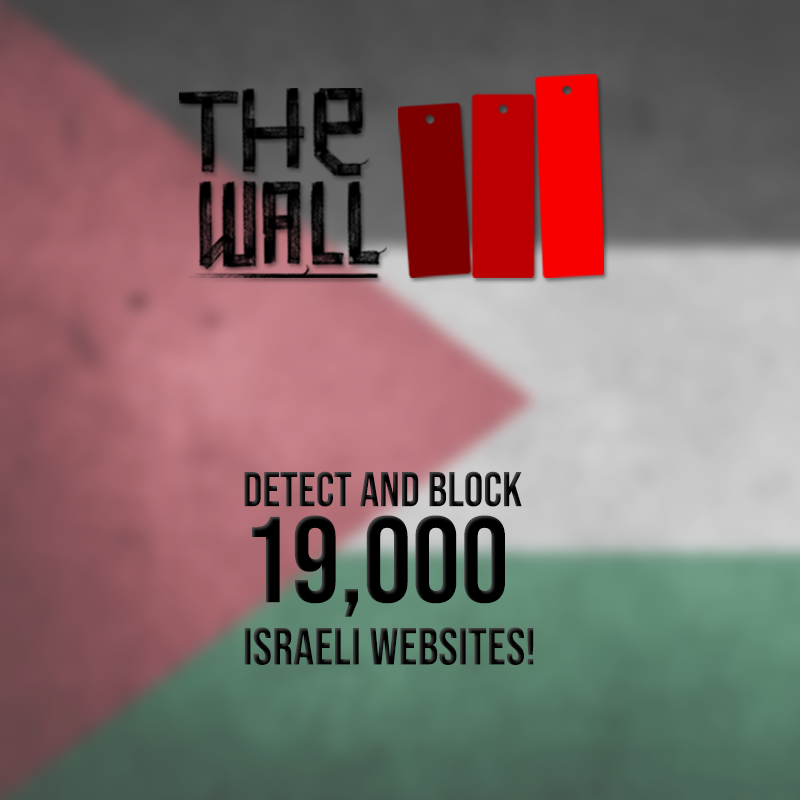
<style>
.page{position:relative;width:800px;height:800px}
.page>*{position:absolute;margin:0}
.t1{font:52.2px "BebasNeue-Regular";color:#000000}
.t2{font:48.7px "BebasNeue-Regular";color:#000000}
.t3{font:121.8px/95.7px "BebasNeue-Regular";color:#000000}
</style>
<div class="page">
<p class="t1" style="left:244px;top:471px;width:290px;height:194px"><span class="t2">Detect and block <br></span><span class="t3">19,000 <br></span>Israeli websites!</p>
</div>
